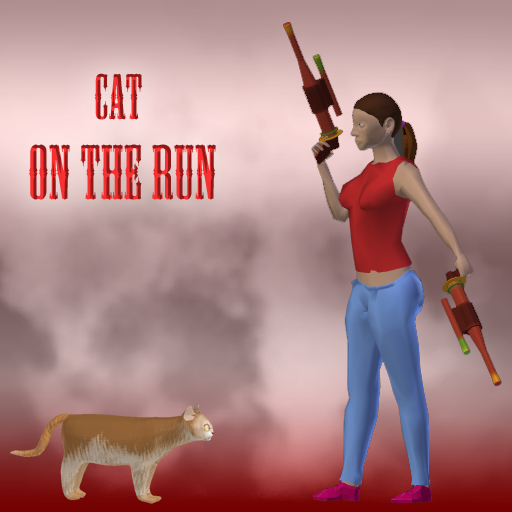
<style>
.page{position:relative;width:512px;height:512px}
.page>*{position:absolute;margin:0}
.t1{font:72px/8px "MesquiteStd";letter-spacing:0.01em}
.t2{font:60px/8px "MesquiteStd";letter-spacing:0.01em}
</style>
<div class="page">
<p class="t1" style="left:29px;top:73px;width:187px;height:127px;text-align:center"><span class="t2">CAT <br><br><br><br><br><br><br><br><br><br></span>ON THE RUN</p>
</div>
